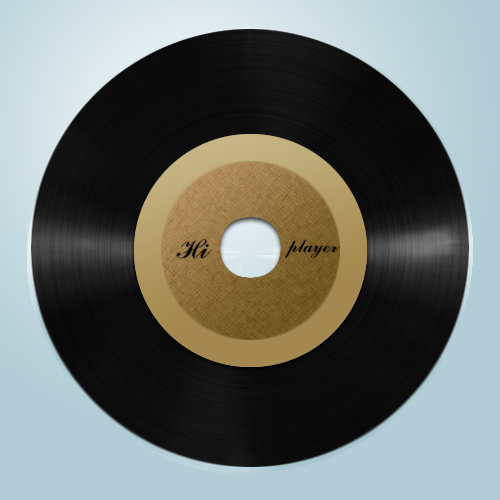
<style>
.page{position:relative;width:500px;height:500px}
.page>*{position:absolute;margin:0}
.t1{font:30px "CommercialScriptBT-Regular";color:#000000}
.t2{font:20px "CommercialScriptBT-Regular";color:#000000}
</style>
<div class="page">
<p class="t1" style="left:176px;top:239px;width:37px;height:20px">Hi</p>
<p class="t2" style="left:285px;top:240px;width:56px;height:18px">player</p>
</div>
